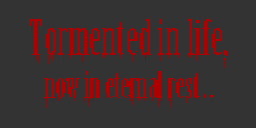
<style>
.page{position:relative;width:256px;height:128px;background:#333333}
.page>*{position:absolute;margin:0}
.t1{font:36px "BirchStd";color:#ae0101}
.t2{font:48px "BirchStd";color:#ae0101}
</style>
<div class="page">
<p class="t1" style="left:29px;top:19px;width:198px;height:79px;text-align:center"><span class="t2">Tormented in life,<br></span>now in eternal rest . .</p>
</div>
